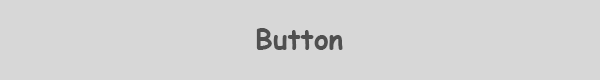
<style>
.page{position:relative;width:600px;height:80px;background:#d7d7d7}
.page>*{position:absolute;margin:0}
.t1{font:28px "ComicSansMS-Bold";color:#505050}
</style>
<div class="page">
<p class="t1" style="left:256px;top:28px;width:87px;height:22px">Button</p>
</div>
